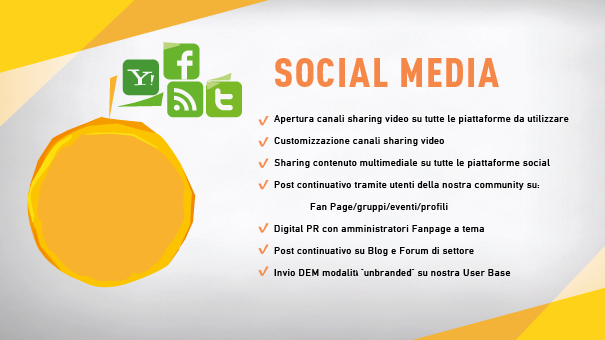
<style>
.page{position:relative;width:605px;height:340px}
.page>*{position:absolute;margin:0}
.t1{font:40.8px "DINCond-Black";letter-spacing:0.04em;color:#f58848}
.t2{font:10px/22px "DinC";letter-spacing:0.04em;color:#000000}
.t3{font:10px/16px "DinC";letter-spacing:0.04em;color:#000000}
.t4{font:10px/22px "SFMoviePoster-Bold";letter-spacing:0.04em;color:#000000}
</style>
<div class="page">
<p class="t1" style="left:275px;top:58px;width:224px;height:29px">SOCIAL MEDIA</p>
<p class="t2" style="left:274px;top:115px;width:295px;height:161px"><span class="t3"> </span>Apertura canali sharing video su tutte le piattaforme da utilizzare<br> Customizzazione canali sharing video<br> Sharing contenuto multimediale su tutte le piattaforme social<br> Post continuativo tramite utenti della nostra community su: <br>  Fan Page/gruppi/eventi/profili<br> Digital PR con amministratori Fanpage a tema<br> Post continuativo su Blog e Forum di settore<br> Invio DEM modalit<span class="t4">à “</span>unbranded<span class="t4">”</span> su nostra User Base</p>
</div>
